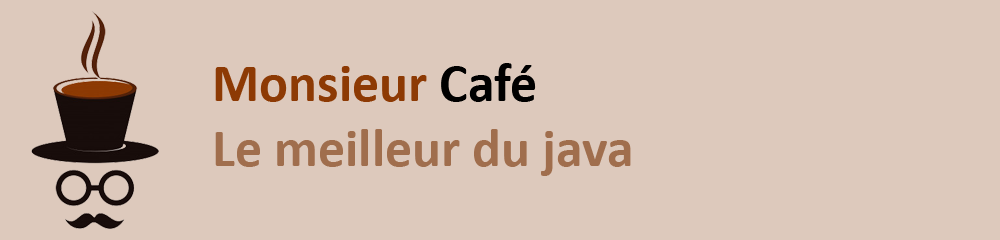
<style>
.page{position:relative;width:1000px;height:240px;background:#ddc9bc}
.page>*{position:absolute;margin:0}
.t1{font:53.9px "Calibri-Bold";color:#a06e4d}
.t2{font:53.9px "Calibri-Bold";color:#8d3a04}
.t3{font:53.9px "Calibri-Bold";color:#000000}
</style>
<div class="page">
<p class="t1" style="left:215px;top:63px;width:416px;height:113px"><span class="t2">Monsieur </span><span class="t3">Café<br></span>Le meilleur du java</p>
</div>
